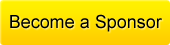
<style>
.page{position:relative;width:170px;height:45px}
.page>*{position:absolute;margin:0}
.t1{font:18px "ArialMT";color:#000000}
</style>
<div class="page">
<p class="t1" style="left:10px;top:14px;width:152px;height:18px">Become a Sponsor</p>
</div>
